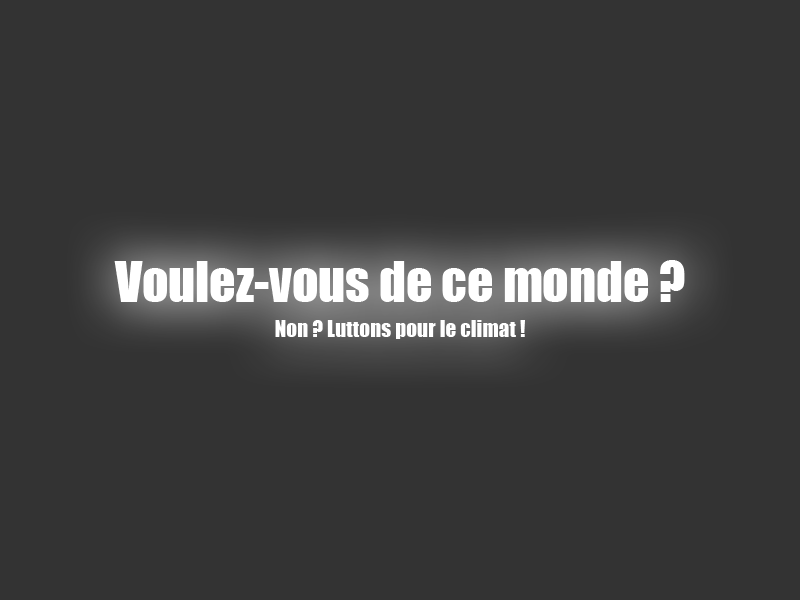
<style>
.page{position:relative;width:800px;height:600px;background:#333333}
.page>*{position:absolute;margin:0}
.t1{font:21.3px/35.4px "Impact";color:#ffffff}
.t2{font:51.8px/35.4px "Impact";color:#ffffff}
</style>
<div class="page">
<p class="t1" style="left:114px;top:260px;width:571px;height:79px;text-align:center"><span class="t2">Voulez-vous de ce monde ?<br></span>Non ? Luttons pour le climat !</p>
</div>
